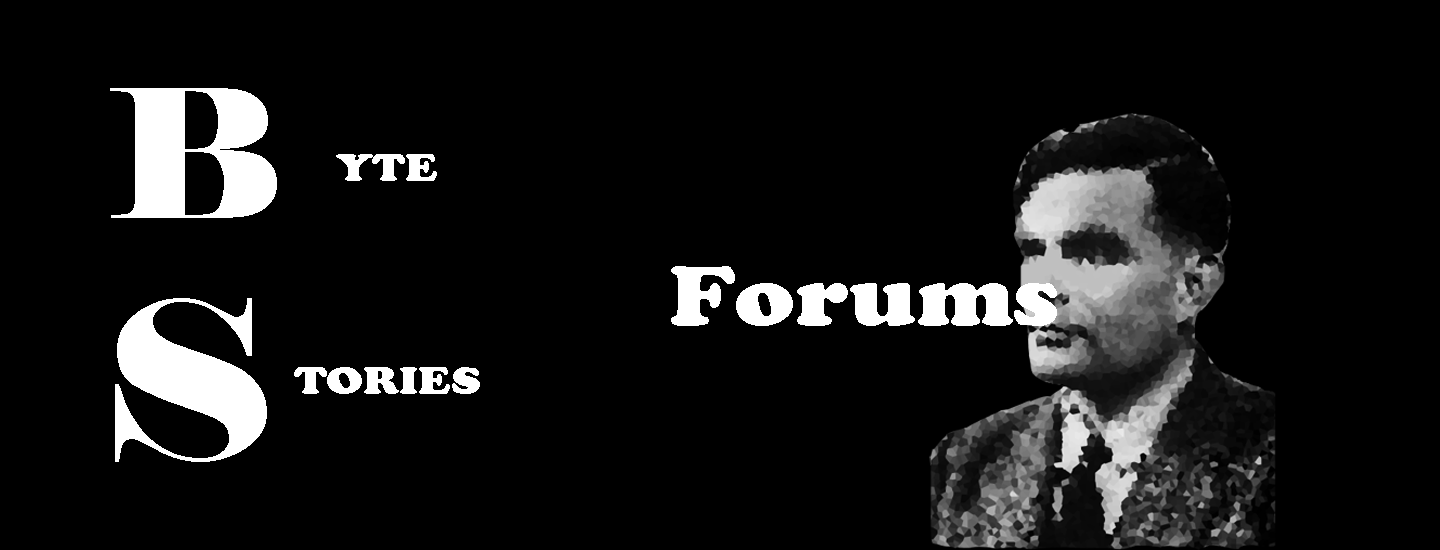
<style>
.page{position:relative;width:1440px;height:550px;background:#000000}
.page>*{position:absolute;margin:0}
.t1{font:177.5px "Elephant-Regular";color:#ffffff;scale:1.15 1}
.t2{font:40.8px "CooperBlack";color:#ffffff;scale:1.15 1}
.t3{font:87px "CooperBlack";color:#ffffff;scale:1.15 1}
.t4{font:218.8px "Elephant-Regular";color:#ffffff;scale:1.15 1}
</style>
<div class="page">
<p class="t1" style="left:110px;top:88px;width:167px;height:130px">B</p>
<p class="t2" style="left:336px;top:154px;width:101px;height:27px">YTE</p>
<p class="t3" style="left:671px;top:266px;width:386px;height:60px">Forums</p>
<p class="t4" style="left:115px;top:298px;width:152px;height:164px">S</p>
<p class="t2" style="left:294px;top:367px;width:186px;height:27px">TORIES</p>
</div>
